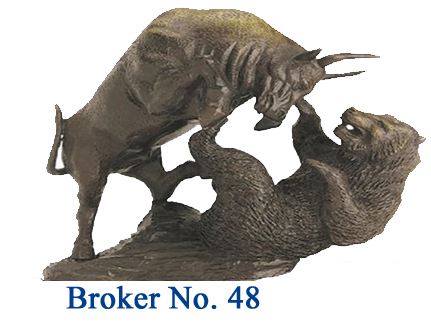
<style>
.page{position:relative;width:431px;height:330px;background:#ffffff}
.page>*{position:absolute;margin:0}
.t1{font:32px "TimesNewRomanPSMT";color:#003f8c;font-weight:bold}
</style>
<div class="page">
<p class="t1" style="left:66px;top:285px;width:194px;height:24px">Broker No. 48</p>
</div>
